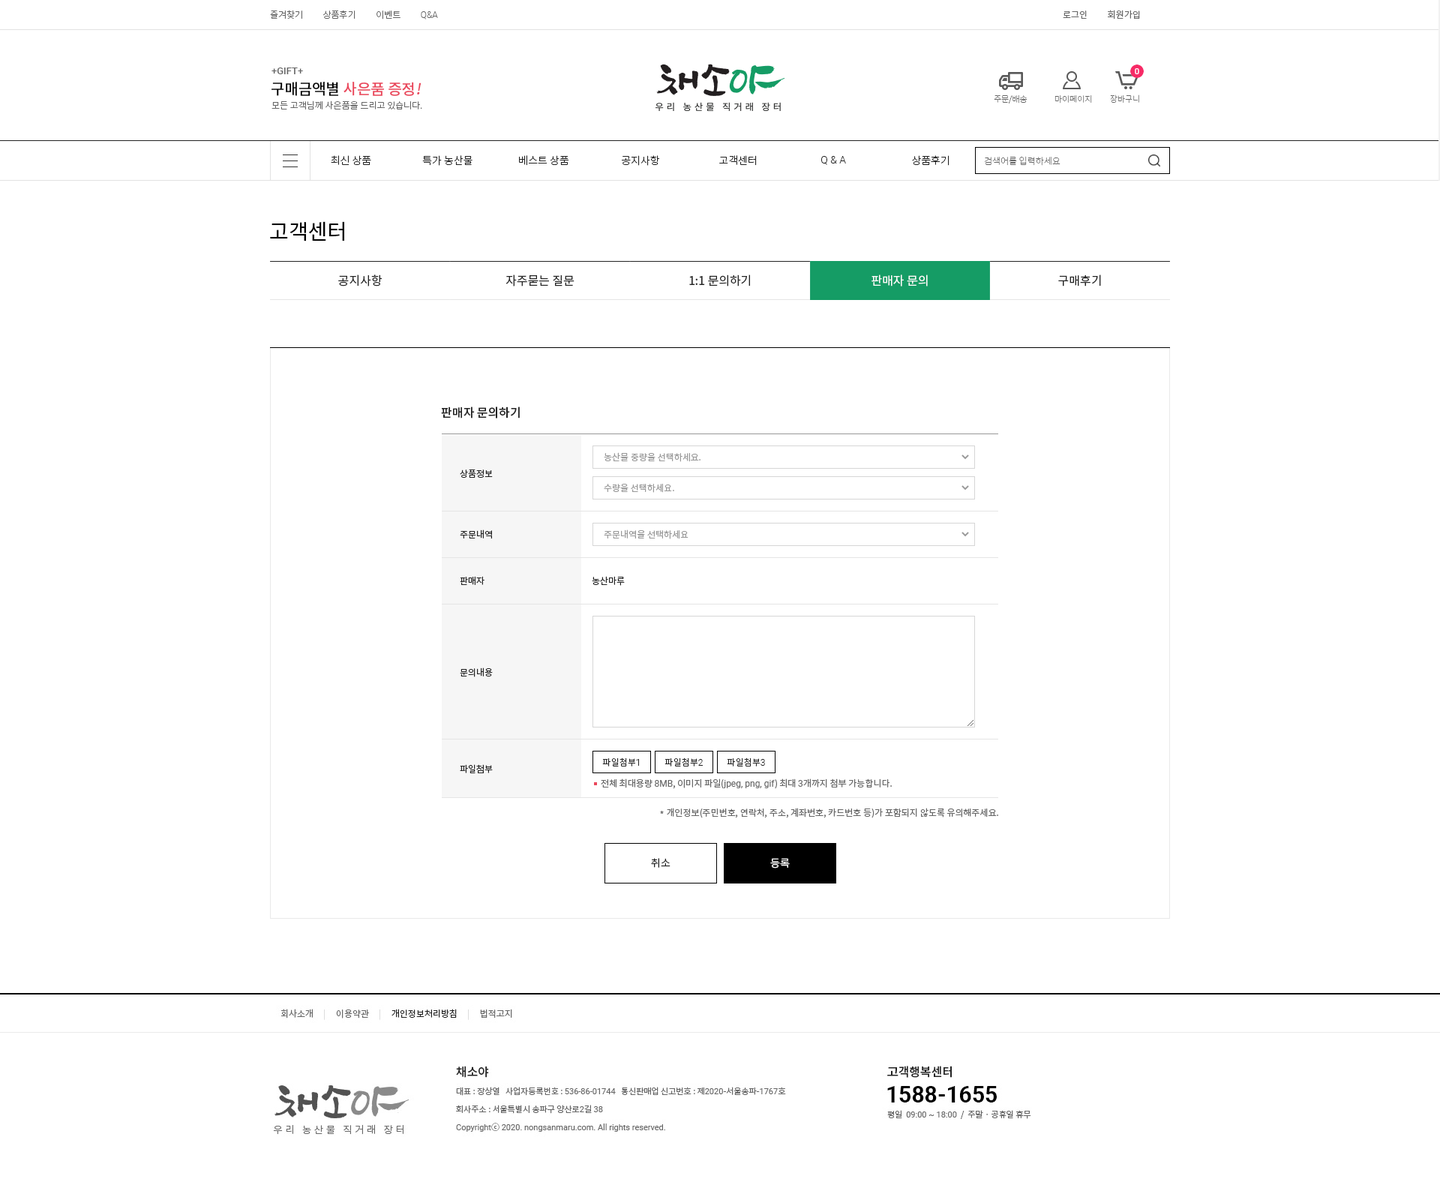
<style>
.page{position:relative;width:1440px;height:1200px;background:#ffffff}
.page>*{position:absolute;margin:0}
.t1{font:9px "NotoSansCJKkr-Light";color:#666666}
.t2{font:9px "Roboto-Light";color:#666666}
.t3{font:9px "NotoSansCJKkr-DemiLight";color:#666666}
.t4{font:9.7px "Roboto-Medium";color:#666666}
.t5{font:15px "NotoSansCJKkr-Medium";color:#ea475c}
.t6{font:15px "NotoSansCJKkr-Medium";color:#000000}
.t7{font:15px "NotoSansCJKkr-Medium";color:#ea475c;font-style:italic}
.t8{font:8.2px "NotoSansCJKkr-Thin";color:#666666}
.t9{font:10.5px "NotoSansCJKkr-Light";color:#222222}
.t10{font:10.5px "Roboto-Light";color:#222222}
.t11{font:9px "NotoSansCJKkr-Thin";color:#666666}
.t12{font:21px "NotoSansCJKkr-Regular";color:#000000}
.t13{font:12px "NotoSansCJKkr-Regular";color:#222222}
.t14{font:12px "NotoSansCJKkr-Regular";color:#ffffff}
.t15{font:12px "NotoSansCJKkr-Medium";color:#222222}
.t16{font:9px "NotoSansCJKkr-Regular";color:#999999}
.t17{font:9px "NotoSansCJKkr-Regular";color:#222222}
.t18{font:9px "NotoSansCJKkr-Light";color:#222222}
.t19{font:9px "Roboto-Light";color:#222222}
.t20{font:9px "Roboto-Regular";color:#666666}
.t21{font:9px "NotoSansCJKkr-Regular";color:#666666}
.t22{font:10.5px "NotoSansCJKkr-DemiLight";color:#222222}
.t23{font:10.5px "NotoSansCJKkr-DemiLight";color:#ffffff}
</style>
<div class="page">
<p class="t1" style="left:270px;top:10px;width:168px;height:9px">즐겨찾기          상품후기          이벤트          <span class="t2">Q&amp;A</span></p>
<p class="t3" style="left:1063px;top:10px;width:77px;height:9px">로그인          회원가입</p>
<p class="t4" style="left:271px;top:67px;width:32px;height:7px">+GIFT+</p>
<p class="t5" style="left:271px;top:82px;width:150px;height:14px"><span class="t6">구매금액별 </span>사은품 증정<span class="t7">!</span></p>
<p class="t1" style="left:271px;top:100px;width:151px;height:9px">모든 고객님께 사은품을 드리고 있습니다.</p>
<p class="t8" style="left:994px;top:94px;width:33px;height:9px">주문/배송</p>
<p class="t8" style="left:1054px;top:95px;width:38px;height:8px">마이페이지</p>
<p class="t8" style="left:1110px;top:94px;width:29px;height:9px">장바구니</p>
<p class="t9" style="left:331px;top:155px;width:40px;height:10px">최신 상품</p>
<p class="t9" style="left:422px;top:155px;width:50px;height:11px">특가 농산물</p>
<p class="t9" style="left:519px;top:155px;width:50px;height:11px">베스트 상품</p>
<p class="t9" style="left:622px;top:155px;width:38px;height:11px">공지사항</p>
<p class="t9" style="left:719px;top:155px;width:38px;height:11px">고객센터</p>
<p class="t10" style="left:821px;top:156px;width:25px;height:9px">Q &amp; A</p>
<p class="t9" style="left:912px;top:155px;width:37px;height:11px">상품후기</p>
<p class="t11" style="left:984px;top:156px;width:76px;height:10px">검색어를 입력하세요</p>
<p class="t12" style="left:270px;top:221px;width:74px;height:20px">고객센터</p>
<p class="t13" style="left:338px;top:274px;width:44px;height:12px">공지사항</p>
<p class="t13" style="left:505px;top:274px;width:69px;height:12px">자주묻는 질문</p>
<p class="t13" style="left:689px;top:274px;width:61px;height:12px">1:1 문의하기</p>
<p class="t14" style="left:871px;top:274px;width:57px;height:12px">판매자 문의</p>
<p class="t13" style="left:1058px;top:274px;width:43px;height:12px">구매후기</p>
<p class="t15" style="left:441px;top:406px;width:79px;height:12px">판매자 문의하기</p>
<p class="t16" style="left:604px;top:452px;width:96px;height:10px">농산물 중량을 선택하세요.</p>
<p class="t17" style="left:460px;top:469px;width:33px;height:9px">상품정보</p>
<p class="t16" style="left:604px;top:484px;width:70px;height:9px">수량을 선택하세요.</p>
<p class="t17" style="left:460px;top:529px;width:32px;height:9px">주문내역</p>
<p class="t16" style="left:604px;top:529px;width:84px;height:10px">주문내역을 선택하세요</p>
<p class="t17" style="left:460px;top:576px;width:24px;height:9px">판매자</p>
<p class="t17" style="left:592px;top:576px;width:33px;height:10px">농산마루</p>
<p class="t17" style="left:460px;top:667px;width:33px;height:10px">문의내용</p>
<p class="t18" style="left:602px;top:757px;width:37px;height:9px">파일첨부<span class="t19">1</span></p>
<p class="t18" style="left:664px;top:757px;width:39px;height:9px">파일첨부<span class="t19">2</span></p>
<p class="t18" style="left:727px;top:757px;width:38px;height:9px">파일첨부<span class="t19">3</span></p>
<p class="t17" style="left:460px;top:764px;width:33px;height:9px">파일첨부</p>
<p class="t20" style="left:601px;top:778px;width:291px;height:11px"><span class="t21">전체 최대용량 </span>8MB<span class="t21">, 이미지 파일(</span>jpeg, png, gif<span class="t21">) 최대 </span>3<span class="t21">개까지 첨부 가능합니다.</span></p>
<p class="t21" style="left:660px;top:808px;width:338px;height:10px">* 개인정보(주민번호, 연락처, 주소, 계좌번호, 카드번호 등)가 포함되지 않도록 유의해주세요.</p>
<p class="t22" style="left:651px;top:858px;width:19px;height:10px">취소</p>
<p class="t23" style="left:770px;top:858px;width:20px;height:10px">등록</p>
</div>
